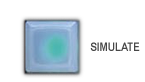
<style>
.page{position:relative;width:145px;height:82px;background:#ffffff}
.page>*{position:absolute;margin:0}
.t1{font:12px "ArialNarrow-Bold";color:#474747}
</style>
<div class="page">
<p class="t1" style="left:90px;top:42px;width:50px;height:9px">SIMULATE</p>
</div>
